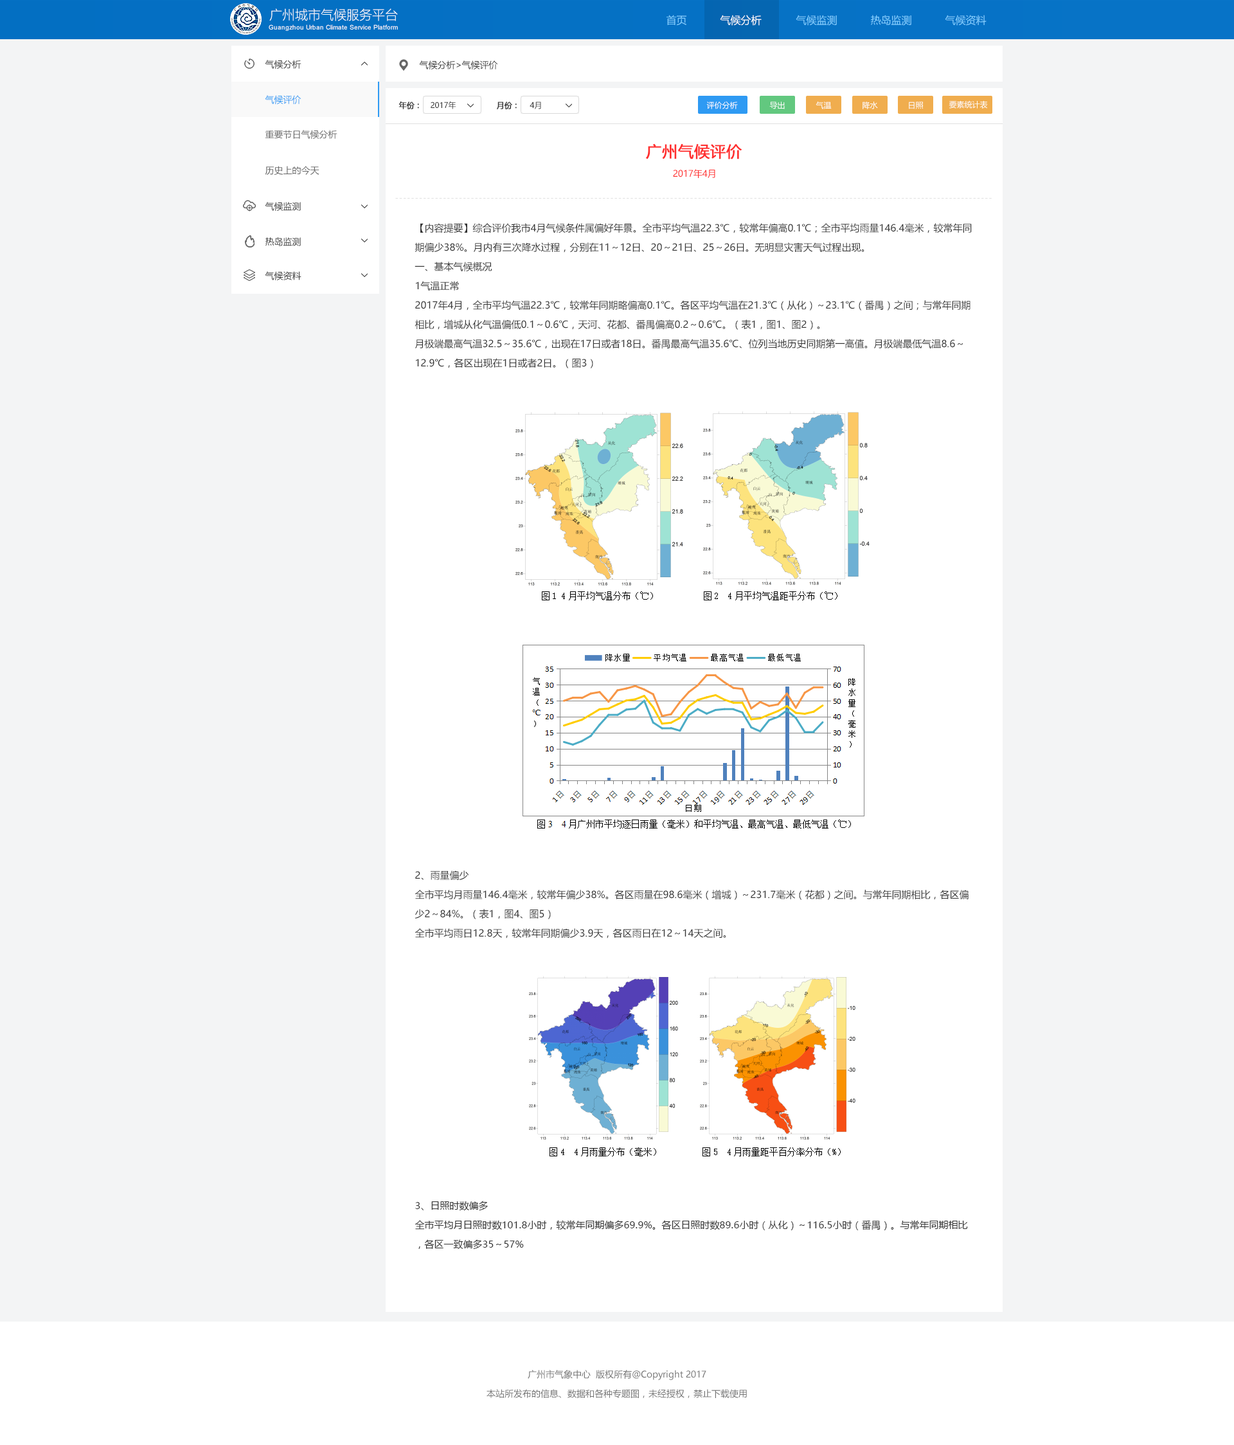
<style>
.page{position:relative;width:1234px;height:1445px;background:#ffffff}
.page>*{position:absolute;margin:0}
.t1{font:12.9px "MicrosoftYaHeiLight";color:#ffffff}
.t2{font:10.3px "MicrosoftYaHei";color:#80ceff}
.t3{font:10.3px "MicrosoftYaHei";color:#ffffff}
.t4{font:6.4px "ArialMT";color:#ffffff}
.t5{font:9px "MicrosoftYaHei";color:#333333}
.t6{font:9px "MicrosoftYaHei";color:#2e9af3}
.t7{font:7.7px "MicrosoftYaHei";color:#333333;font-weight:bold}
.t8{font:7.7px "MicrosoftYaHei";color:#333333}
.t9{font:7.7px "MicrosoftYaHei";color:#ffffff}
.t10{font:9px "MicrosoftYaHei";color:#666666}
.t11{font:15.4px "MicrosoftYaHei";color:#ff2e2e;font-weight:bold}
.t12{font:9px "MicrosoftYaHei";color:#ff2e2e}
.t13{font:7.7px "MicrosoftYaHei";letter-spacing:0.1em;color:#e0e0e0}
.t14{font:9.6px/19.3px "MicrosoftYaHei";color:#333333}
.t15{font:9px "MicrosoftYaHei";color:#737373}
</style>
<div class="page">
<p class="t1" style="left:269px;top:8px;width:129px;height:13px">广州城市气候服务平台</p>
<p class="t2" style="left:667px;top:15px;width:20px;height:11px">首页</p>
<p class="t3" style="left:720px;top:15px;width:42px;height:11px">气候分析</p>
<p class="t2" style="left:796px;top:15px;width:41px;height:11px">气候监测</p>
<p class="t2" style="left:871px;top:15px;width:41px;height:11px">热岛监测</p>
<p class="t2" style="left:945px;top:15px;width:42px;height:11px">气候资料</p>
<p class="t4" style="left:269px;top:24px;width:129px;height:7px">Guangzhou Urban Climate Service Platform</p>
<p class="t5" style="left:265px;top:60px;width:37px;height:9px">气候分析</p>
<p class="t5" style="left:419px;top:60px;width:79px;height:9px">气候分析&gt;气候评价</p>
<p class="t6" style="left:265px;top:95px;width:37px;height:9px">气候评价</p>
<p class="t7" style="left:399px;top:101px;width:20px;height:8px">年份：</p>
<p class="t8" style="left:431px;top:101px;width:25px;height:8px">2017年</p>
<p class="t7" style="left:497px;top:102px;width:20px;height:7px">月份：</p>
<p class="t8" style="left:530px;top:102px;width:11px;height:7px">4月</p>
<p class="t9" style="left:706px;top:101px;width:32px;height:8px">评价分析</p>
<p class="t9" style="left:770px;top:102px;width:15px;height:7px">导出</p>
<p class="t9" style="left:816px;top:102px;width:16px;height:7px">气温</p>
<p class="t9" style="left:863px;top:102px;width:15px;height:7px">降水</p>
<p class="t9" style="left:909px;top:102px;width:15px;height:7px">日照</p>
<p class="t9" style="left:949px;top:100px;width:39px;height:9px">要素统计表</p>
<p class="t10" style="left:265px;top:130px;width:73px;height:9px">重要节日气候分析</p>
<p class="t11" style="left:646px;top:144px;width:96px;height:15px">广州气候评价</p>
<p class="t10" style="left:265px;top:166px;width:55px;height:9px">历史上的今天</p>
<p class="t12" style="left:673px;top:169px;width:43px;height:9px">2017年4月</p>
<p class="t5" style="left:265px;top:202px;width:36px;height:9px">气候监测</p>
<p class="t13" style="left:395px;top:198px;width:597px;height:1px">------------------------------------------------------------------------------------------------------------------------------------------------------</p>
<p class="t14" style="left:415px;top:223px;width:557px;height:145px">【内容提要】综合评价我市4月气候条件属偏好年景。全市平均气温22.3℃，较常年偏高0.1℃；全市平均雨量146.4毫米，较常年同期偏少38%。月内有三次降水过程，分别在11～12日、20～21日、25～26日。无明显灾害天气过程出现。<br>一、基本气候概况<br>1气温正常<br>2017年4月，全市平均气温22.3℃，较常年同期略偏高0.1℃。各区平均气温在21.3℃（从化）～23.1℃（番禺）之间；与常年同期相比，增城从化气温偏低0.1～0.6℃，天河、花都、番禺偏高0.2～0.6℃。（表1，图1、图2）。<br>月极端最高气温32.5～35.6℃，出现在17日或者18日。番禺最高气温35.6℃、位列当地历史同期第一高值。月极端最低气温8.6～12.9℃，各区出现在1日或者2日。（图3）</p>
<p class="t5" style="left:266px;top:237px;width:35px;height:9px">热岛监测</p>
<p class="t5" style="left:265px;top:271px;width:37px;height:9px">气候资料</p>
<p class="t14" style="left:415px;top:870px;width:554px;height:69px">2、雨量偏少<br>全市平均月雨量146.4毫米，较常年偏少38%。各区雨量在98.6毫米（增城）～231.7毫米（花都）之间。与常年同期相比，各区偏少2～84%。（表1，图4、图5）<br>全市平均雨日12.8天，较常年同期偏少3.9天，各区雨日在12～14天之间。</p>
<p class="t14" style="left:415px;top:1201px;width:553px;height:49px">3、日照时数偏多<br>全市平均月日照时数101.8小时，较常年同期偏多69.9%。各区日照时数89.6小时（从化）～116.5小时（番禺）。与常年同期相比，各区一致偏多35～57%</p>
<p class="t15" style="left:528px;top:1370px;width:178px;height:10px">广州市气象中心  版权所有@Copyright 2017</p>
<p class="t15" style="left:487px;top:1389px;width:260px;height:9px">本站所发布的信息、数据和各种专题图，未经授权，禁止下载使用</p>
</div>
